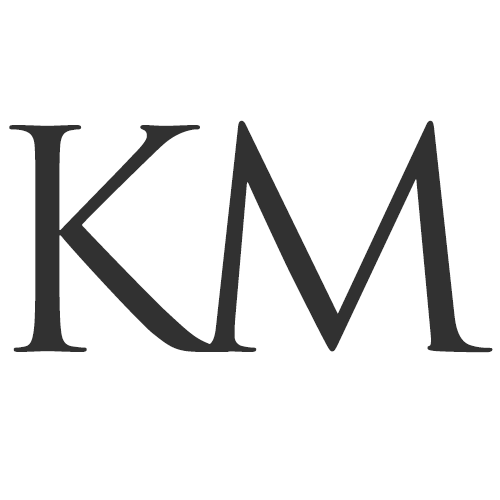
<style>
.page{position:relative;width:500px;height:500px;background:#ffffff}
.page>*{position:absolute;margin:0}
.t1{font:300px "TrajanPro-Regular";letter-spacing:-0.1em;color:#313131;text-transform:uppercase}
</style>
<div class="page">
<p class="t1" style="left:9px;top:120px;width:484px;height:233px">KM</p>
</div>
